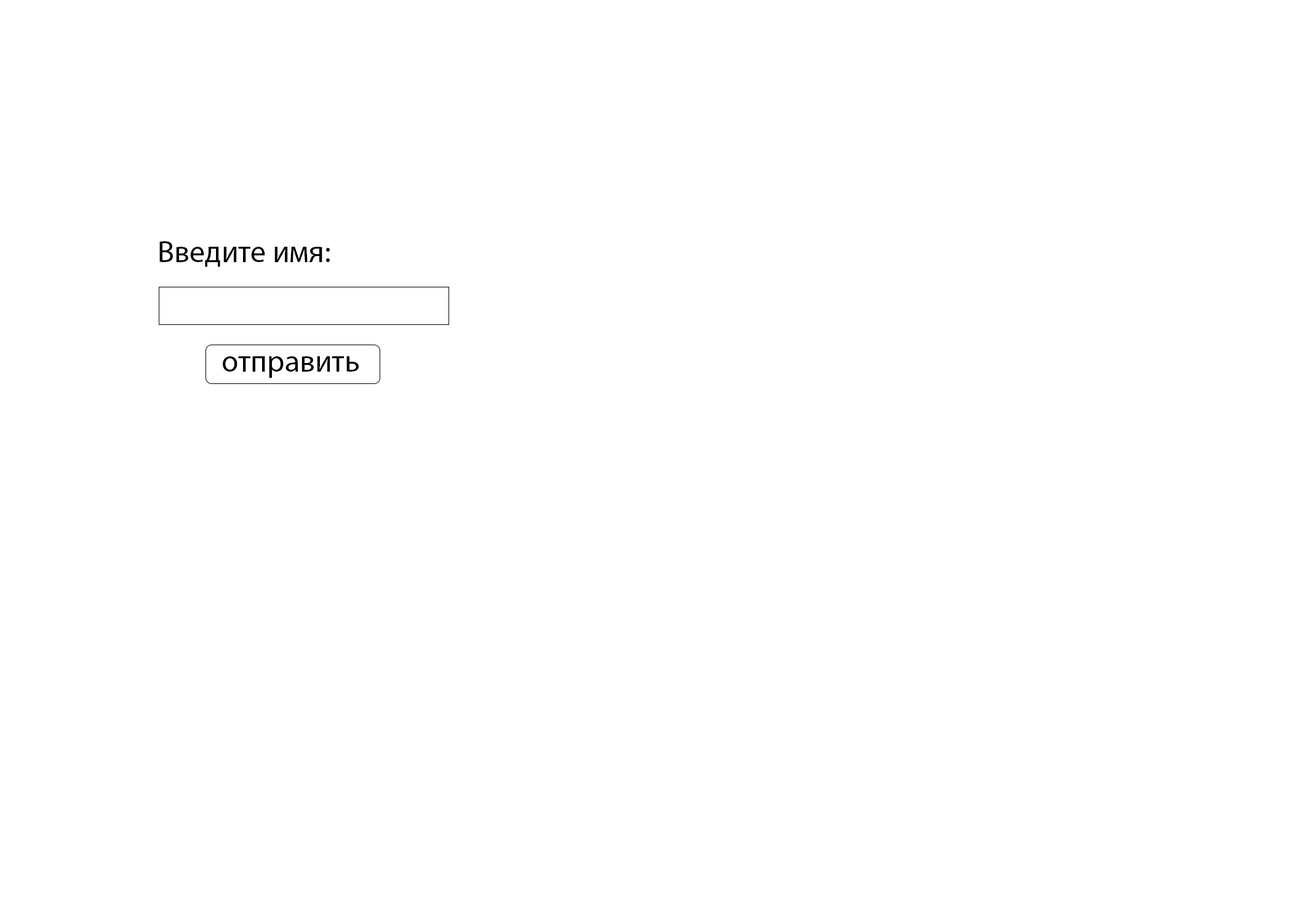
<style>
.page{position:relative;width:1292px;height:923px;background:#ffffff}
.page>*{position:absolute;margin:0}
.t1{font:30.8px "MyriadPro-Regular";color:#000000}
</style>
<div class="page">
<p class="t1" style="left:159px;top:241px;width:171px;height:26px">Введите имя:</p>
<p class="t1" style="left:223px;top:356px;width:136px;height:22px">отправить</p>
</div>
